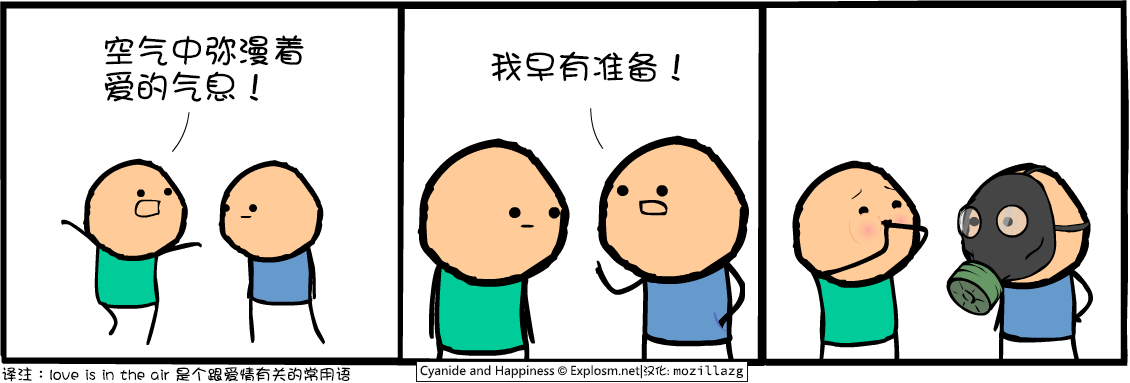
<style>
.page{position:relative;width:1130px;height:383px;background:#ffffff}
.page>*{position:absolute;margin:0}
.t1{font:34px/36px "DFGirl";color:#000000}
.t2{font:34px "DFGirl";color:#000000}
.t3{font:16px "DFGirl";color:#000000}
</style>
<div class="page">
<p class="t1" style="left:104px;top:35px;width:200px;height:67px">空气中弥漫着<br>爱的气息！</p>
<p class="t2" style="left:491px;top:51px;width:189px;height:31px">我早有准备！</p>
<p class="t3" style="left:2px;top:367px;width:349px;height:15px">译注：love is in the air 是个跟爱情有关的常用语</p>
</div>
